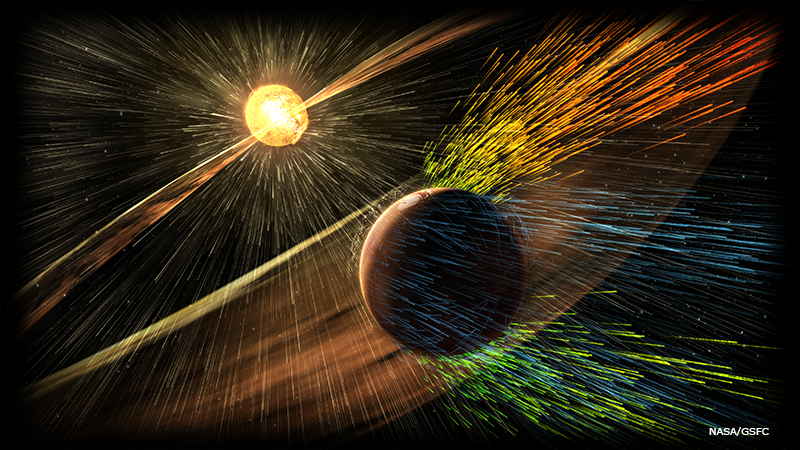
<style>
.page{position:relative;width:800px;height:450px}
.page>*{position:absolute;margin:0}
.t1{font:10px "Verdana";color:#ffffff}
</style>
<div class="page">
<p class="t1" style="left:709px;top:427px;width:60px;height:9px">NASA/GSFC</p>
</div>
